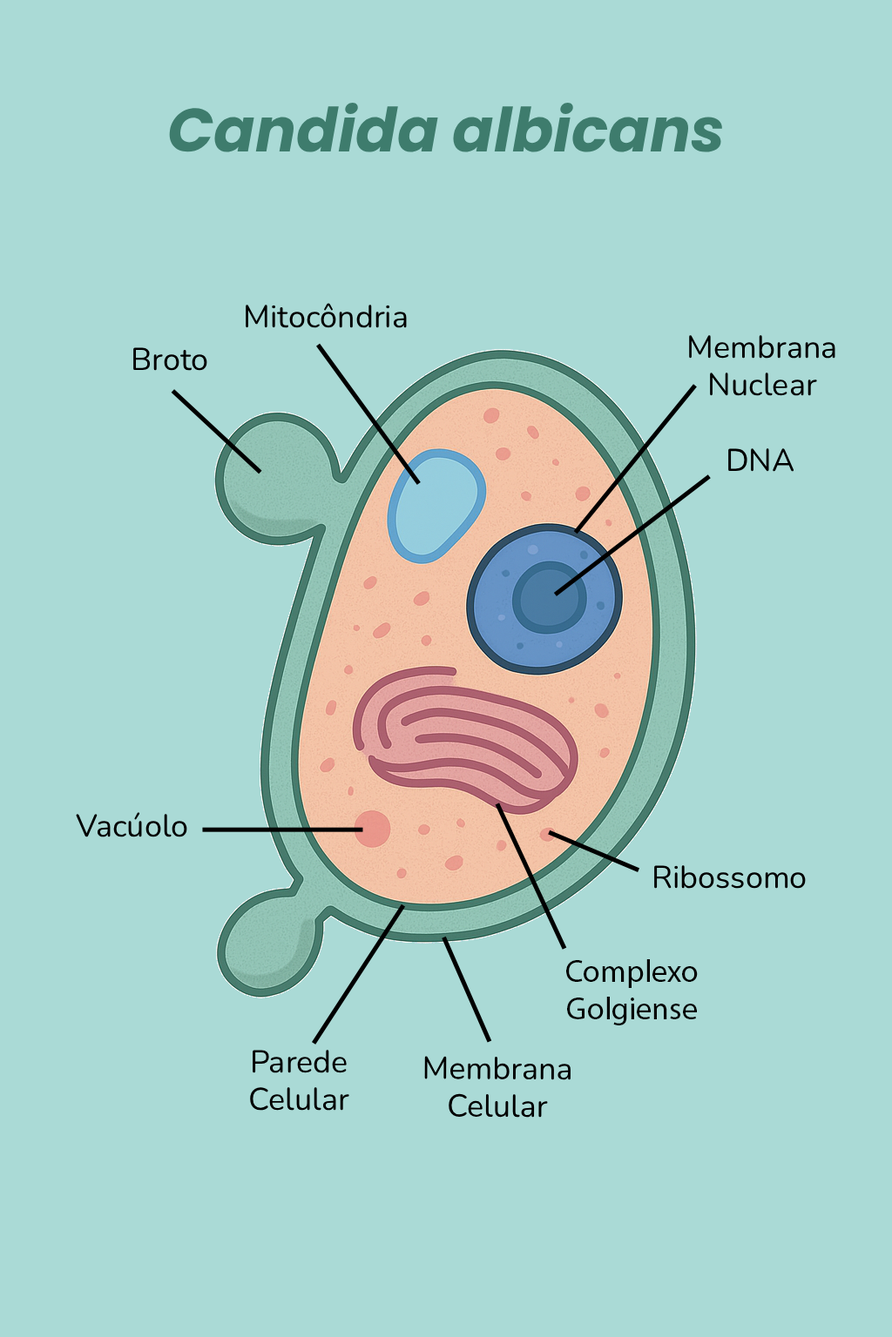
<style>
.page{position:relative;width:892px;height:1337px;background:#aadad6}
.page>*{position:absolute;margin:0}
.t1{font:60.9px "Poppins-BoldItalic";color:#3e7c6d}
.t2{font:31.3px "Nunito-Regular";color:#000000}
.t3{font:31.3px "MyriadPro-Regular";color:#000000}
</style>
<div class="page">
<p class="t1" style="left:167px;top:102px;width:556px;height:50px">Candida albicans</p>
<p class="t2" style="left:246px;top:303px;width:161px;height:25px">Mitocôndria</p>
<p class="t2" style="left:689px;top:335px;width:146px;height:61px;text-align:center">Membrana Nuclear</p>
<p class="t2" style="left:133px;top:347px;width:74px;height:24px">Broto</p>
<p class="t2" style="left:728px;top:448px;width:66px;height:24px">DNA</p>
<p class="t2" style="left:76px;top:812px;width:111px;height:26px">Vacúolo</p>
<p class="t2" style="left:654px;top:865px;width:151px;height:24px">Ribossomo</p>
<p class="t3" style="left:566px;top:960px;width:131px;height:66px;text-align:center">Complexo<br>Golgiense</p>
<p class="t2" style="left:250px;top:1050px;width:99px;height:61px;text-align:center">Parede<br>Celular</p>
<p class="t2" style="left:424px;top:1056px;width:146px;height:62px;text-align:center">Membrana<br>Celular</p>
</div>
